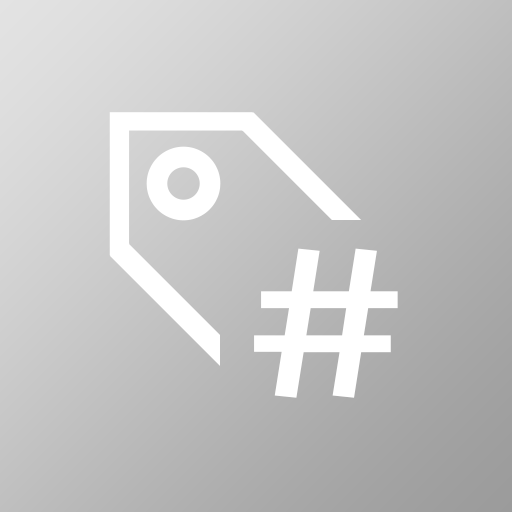
<style>
.page{position:relative;width:512px;height:512px}
.page>*{position:absolute;margin:0}
.t1{font:195px "Futura-Medium";letter-spacing:0.05em;color:#ffffff;text-transform:uppercase;scale:1.27 1}
</style>
<div class="page">
<p class="t1" style="left:254px;top:248px;width:144px;height:150px">#</p>
</div>
